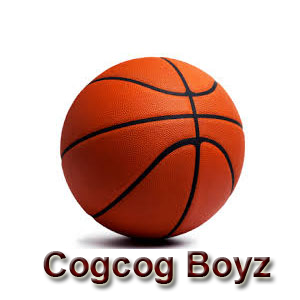
<style>
.page{position:relative;width:300px;height:300px;background:#ffffff}
.page>*{position:absolute;margin:0}
.t1{font:36px "Arial-BoldMT"}
</style>
<div class="page">
<p class="t1" style="left:43px;top:251px;width:228px;height:33px">Cogcog Boyz</p>
</div>
